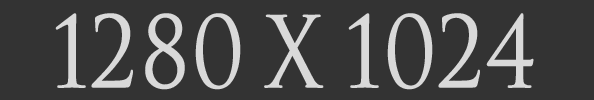
<style>
.page{position:relative;width:594px;height:100px;background:#333333}
.page>*{position:absolute;margin:0}
.t1{font:95.5px "SpaceandAstronomy";color:#d9d9d9;scale:0.87 1}
</style>
<div class="page">
<p class="t1" style="left:55px;top:13px;width:479px;height:77px">1280 x 1024</p>
</div>
